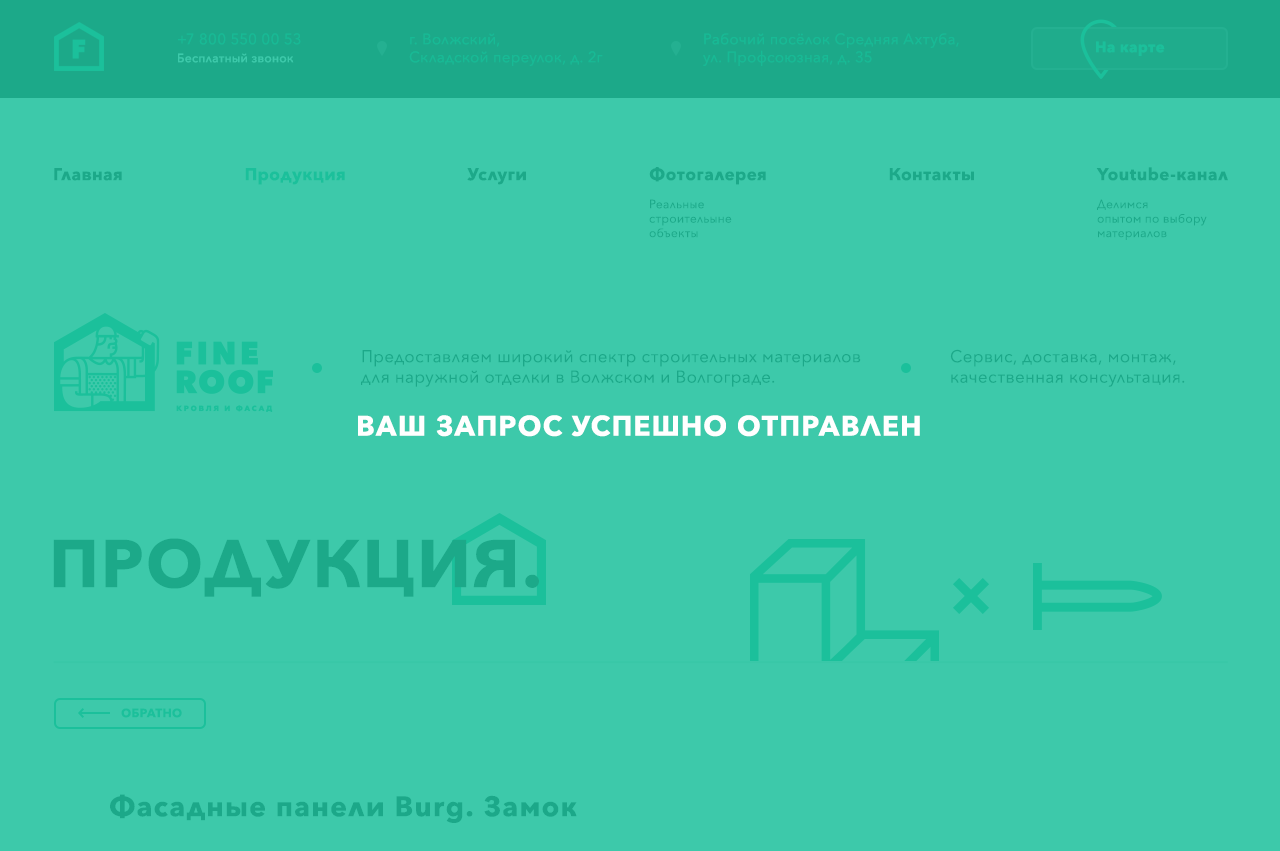
<style>
.page{position:relative;width:1280px;height:851px;background:#3dc9aa}
.page>*{position:absolute;margin:0}
.t1{font:15px "AvenirNext-Regular";letter-spacing:0.025em;color:#17ba95}
.t2{font:15px "AvenirNext-Bold";letter-spacing:0.025em;color:#1bc09b}
.t3{font:12px "AvenirNext-Medium";letter-spacing:0.025em;color:#3dc9aa}
.t4{font:17px "AvenirNext-Bold";letter-spacing:0.025em;color:#232323}
.t5{font:17px "AvenirNext-Bold";letter-spacing:0.025em;color:#1bc09b}
.t6{font:12px "AvenirNext-Regular";letter-spacing:0.025em;color:#1ca989}
.t7{font:17px "AvenirNext-Regular";letter-spacing:0.025em;color:#1ca889}
.t8{font:28px "AvenirNext-Bold";letter-spacing:0.05em;color:#ffffff;text-transform:uppercase}
.t9{font:67px "AvenirNext-Bold";letter-spacing:0.05em;color:#1ca989;text-transform:uppercase}
.t10{font:12px "AvenirNext-Bold";letter-spacing:0.025em;color:#1bc09b;text-transform:uppercase}
.t11{font:28px "AvenirNext-Bold";letter-spacing:0.05em;color:#1ca889}
</style>
<div class="page">
<p class="t1" style="left:178px;top:33px;width:123px;height:12px">+7 800 550 00 53</p>
<p class="t1" style="left:409px;top:33px;width:194px;height:33px">г. Волжский, <br>Складской переулок, д. 2г</p>
<p class="t1" style="left:703px;top:33px;width:256px;height:33px">Рабочий посёлок Средняя Ахтуба, <br>ул. Профсоюзная, д. 35</p>
<p class="t2" style="left:1096px;top:41px;width:69px;height:15px">На карте</p>
<p class="t3" style="left:178px;top:53px;width:116px;height:10px">Бесплатный звонок</p>
<p class="t4" style="left:54px;top:167px;width:1174px;height:18px">Главная <span class="t5">Продукция</span> Услуги Фотогалерея Контакты Youtube-канал</p>
<p class="t6" style="left:649px;top:199px;width:83px;height:39px">Реальные <br>строительыне<br>объекты</p>
<p class="t6" style="left:1097px;top:199px;width:110px;height:41px">Делимся<br>опытом по выбору<br>материалов</p>
<p class="t7" style="left:361px;top:350px;width:500px;height:37px">Предоставляем широкий спектр строительных материалов <br>для наружной отделки в Волжском и Волгограде.</p>
<p class="t7" style="left:950px;top:349px;width:235px;height:38px">Сервис, доставка, монтаж,<br>качественная консультация.</p>
<p class="t8" style="left:358px;top:415px;width:562px;height:22px">Ваш запрос успешно отправлен</p>
<p class="t9" style="left:53px;top:538px;width:486px;height:59px">продукция.</p>
<p class="t10" style="left:121px;top:708px;width:61px;height:10px">ОБРАТНО</p>
<p class="t11" style="left:110px;top:794px;width:467px;height:29px">Фасадные панели Burg. Замок</p>
</div>
